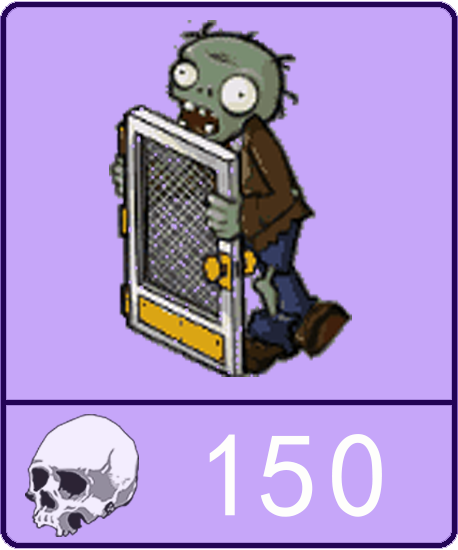
<style>
.page{position:relative;width:458px;height:550px;background:#c6a6f9}
.page>*{position:absolute;margin:0}
.t1{font:120px "SimHei";letter-spacing:0.075em;color:#fefefc}
.t2{font:120px "SimHei";color:#fefefc}
</style>
<div class="page">
<p class="t1" style="left:209px;top:434px;width:173px;height:83px"><span class="t2">1</span>50</p>
</div>
